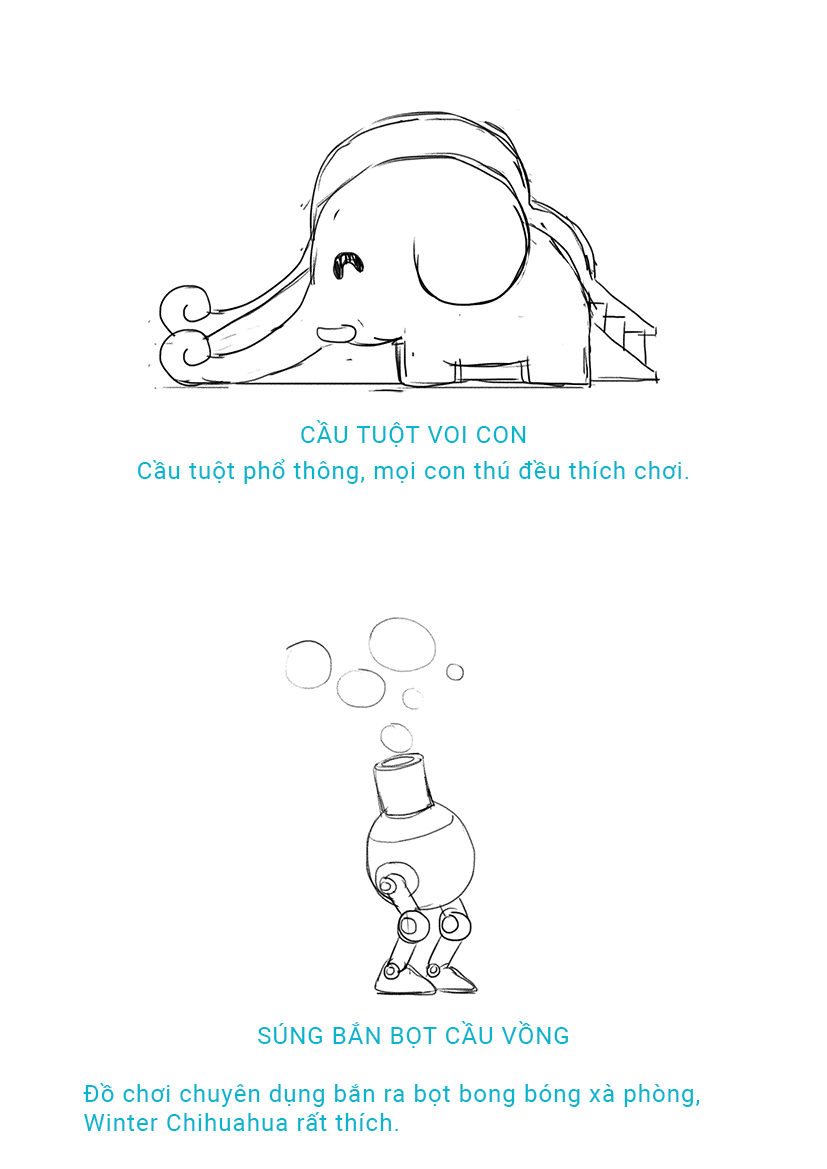
<style>
.page{position:relative;width:827px;height:1169px;background:#ffffff}
.page>*{position:absolute;margin:0}
.t1{font:24px/18px "Roboto-Regular";letter-spacing:0.05em;color:#06b4cd}
.t2{font:24px/18px "Roboto-Regular";letter-spacing:0.05em;color:#06b4cd;text-transform:uppercase}
.t3{font:24px "Roboto-Regular";letter-spacing:0.05em;color:#06b4cd}
.t4{font:24px "Roboto-Regular";letter-spacing:0.05em;color:#06b4cd;text-transform:uppercase}
</style>
<div class="page">
<p class="t1" style="left:138px;top:420px;width:551px;height:64px;text-align:center"><span class="t2">Cầu tuột voi con<br></span><br>Cầu tuột phổ thông, mọi con thú đều thích chơi.</p>
<p class="t3" style="left:83px;top:1021px;width:617px;height:110px;text-align:center"><span class="t4">súng bắn bọt cầu vồng<br></span><br>Đồ chơi chuyên dụng bắn ra bọt bong bóng xà phòng, Winter Chihuahua rất thích.</p>
</div>
